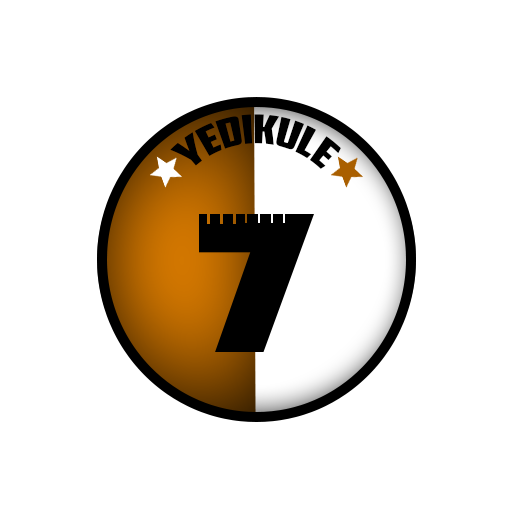
<style>
.page{position:relative;width:512px;height:512px;background:#ffffff}
.page>*{position:absolute;margin:0}
.t1{font:56.7px "AmericanCaptain";color:#000000;font-variant:small-caps}
</style>
<div class="page">
<p class="t1" style="left:170px;top:114px;width:171px;height:55px">yedıkule</p>
</div>
